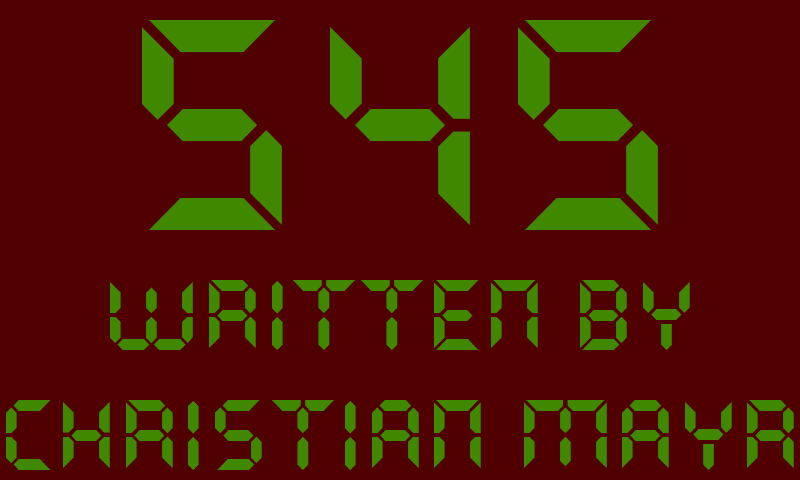
<style>
.page{position:relative;width:800px;height:480px;background:#510000}
.page>*{position:absolute;margin:0}
.t1{font:100px "QuartzMS";color:#408800}
.t2{font:300px "QuartzMS";color:#408800}
</style>
<div class="page">
<p class="t1" style="left:6px;top:20px;width:788px;height:450px;text-align:center"><span class="t2">545<br></span>written by<br>christian mayr</p>
</div>
